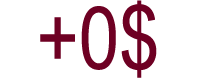
<style>
.page{position:relative;width:197px;height:78px;background:#ffffff}
.page>*{position:absolute;margin:0}
.t1{font:87.1px "ArialMT";color:#6e0023;scale:0.83 1}
</style>
<div class="page">
<p class="t1" style="left:40px;top:0px;width:117px;height:78px">+0$</p>
</div>
